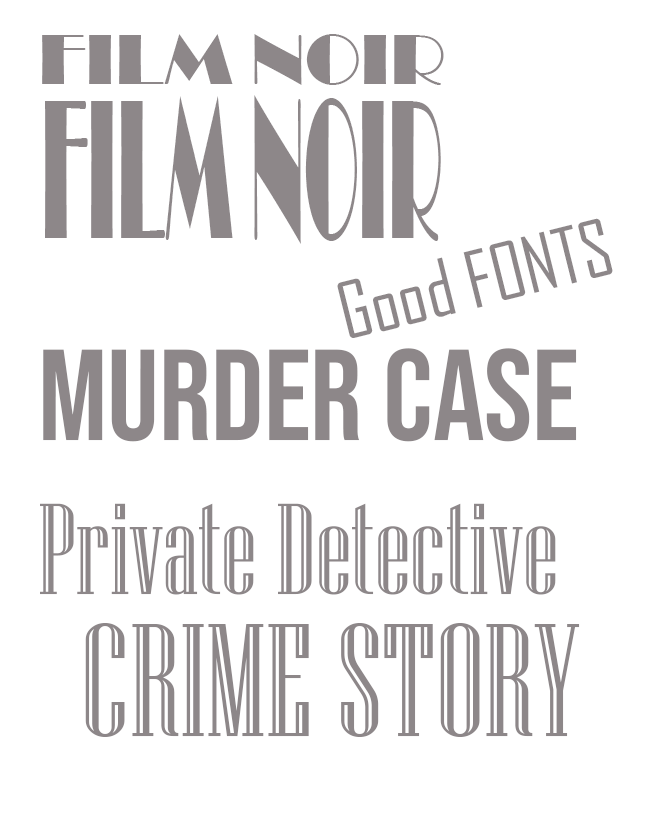
<style>
.page{position:relative;width:660px;height:830px;background:#ffffff}
.page>*{position:absolute;margin:0}
.t1{font:72.7px "Broadway";color:#8d8789}
.t2{font:205.7px "Broadway";color:#8d8789;scale:0.35 1}
.t3{font:74.6px "AgencyFB-Reg";color:#8d8789}
.t4{font:129.1px "NiagaraEngraved-Reg";color:#8d8789}
.t5{font:129.1px "BebasNeue-Regular";color:#8d8789}
.t6{font:161.3px "NiagaraEngraved-Reg";color:#8d8789}
</style>
<div class="page">
<p class="t1" style="left:42px;top:34px;width:402px;height:51px">FILM NOIR</p>
<p class="t2" style="left:45px;top:95px;width:396px;height:149px">FILM NOIR</p>
<p class="t3" style="left:337px;top:218px;width:276px;height:120px;rotate:-14deg">Good FONTS</p>
<p class="t4" style="left:40px;top:348px;width:537px;height:247px"><span class="t5">Murder case</span> <br>Private Detective</p>
<p class="t6" style="left:85px;top:623px;width:495px;height:114px">CRIME STORY</p>
</div>
